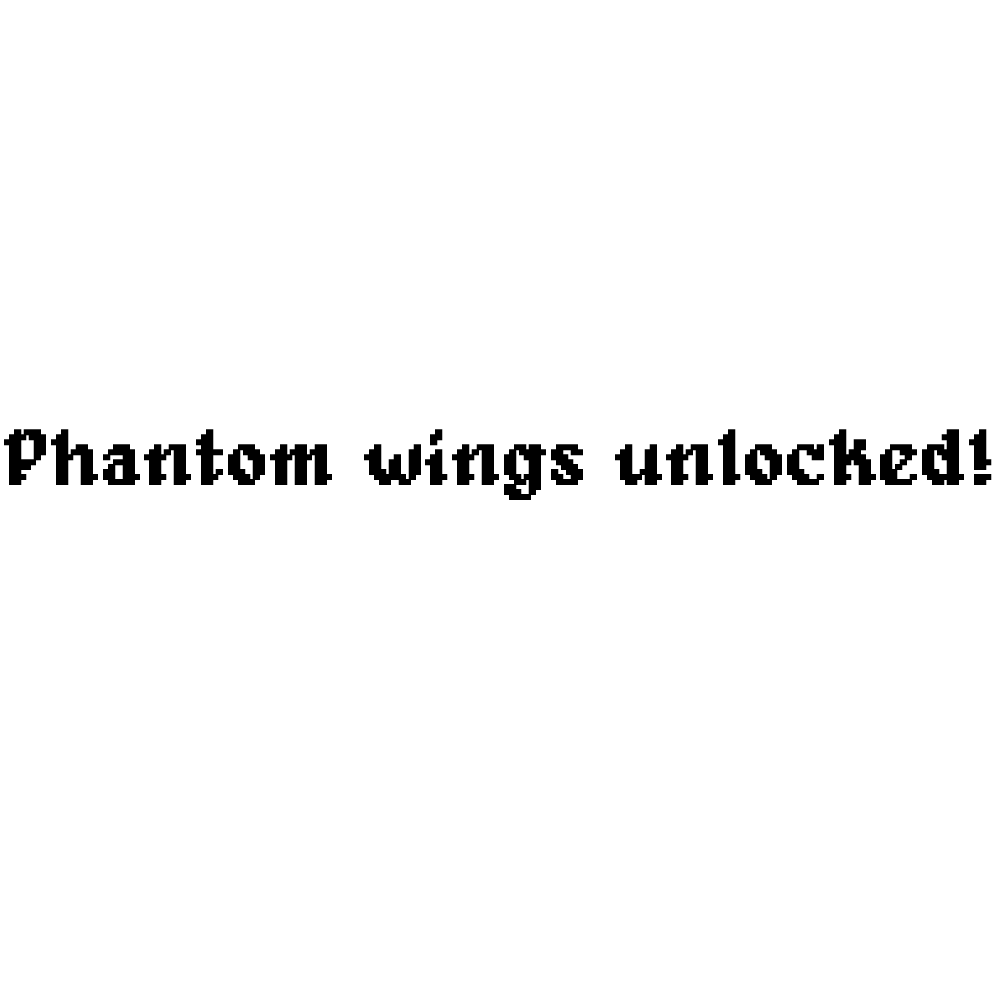
<style>
.page{position:relative;width:1000px;height:1000px;background:#ffffff}
.page>*{position:absolute;margin:0}
.t1{font:79.4px "Alagard";color:#000000;font-weight:bold}
</style>
<div class="page">
<p class="t1" style="left:4px;top:429px;width:988px;height:71px">Phantom wings unlocked!</p>
</div>
